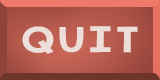
<style>
.page{position:relative;width:160px;height:80px}
.page>*{position:absolute;margin:0}
.t1{font:29.2px "KGBlankSpaceSolid";letter-spacing:0.1em;color:#edded9;scale:1.37 1}
</style>
<div class="page">
<p class="t1" style="left:22px;top:26px;width:116px;height:28px">QUIT</p>
</div>
